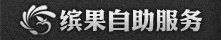
<style>
.page{position:relative;width:221px;height:40px}
.page>*{position:absolute;margin:0}
.t1{font:24px "DFLiJinHeiW8"}
</style>
<div class="page">
<p class="t1" style="left:60px;top:9px;width:142px;height:23px">缤果自助服务</p>
</div>
